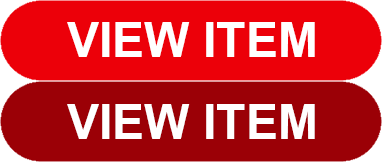
<style>
.page{position:relative;width:382px;height:162px;background:#9b0006}
.page>*{position:absolute;margin:0}
.t1{font:48px "Arial-BoldMT";color:#ffffff;font-variant:small-caps}
</style>
<div class="page">
<p class="t1" style="left:67px;top:22px;width:248px;height:35px">VIEW ITEM</p>
<p class="t1" style="left:67px;top:104px;width:248px;height:35px">VIEW ITEM</p>
</div>
